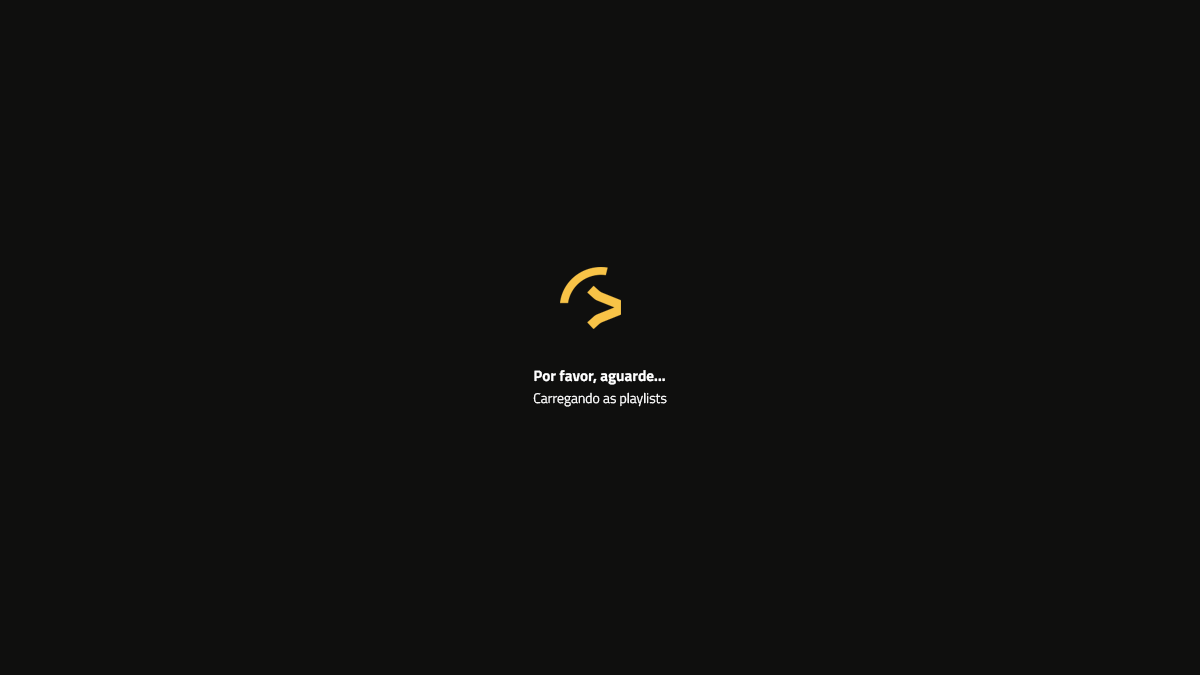
<style>
.page{position:relative;width:1200px;height:675px;background:#0f0f0e}
.page>*{position:absolute;margin:0}
.t1{font:15.2px "TitilliumWeb-Bold";color:#ffffff}
.t2{font:13.9px "TitilliumWeb-Light";color:#ffffff}
</style>
<div class="page">
<p class="t1" style="left:534px;top:370px;width:131px;height:15px">Por favor, aguarde...</p>
<p class="t2" style="left:533px;top:392px;width:134px;height:15px">Carregando as playlists</p>
</div>
